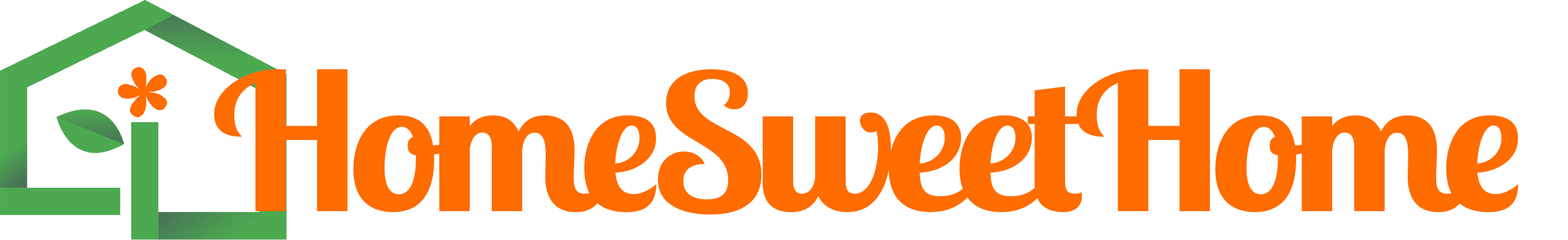
<style>
.page{position:relative;width:1568px;height:240px;background:#ffffff}
.page>*{position:absolute;margin:0}
.t1{font:189.8px "LobsterTwo-Bold";letter-spacing:-0.05em;color:#ff6c00;scale:1.12 1}
</style>
<div class="page">
<p class="t1" style="left:214px;top:69px;width:1304px;height:146px">HomeSweetHome</p>
</div>
